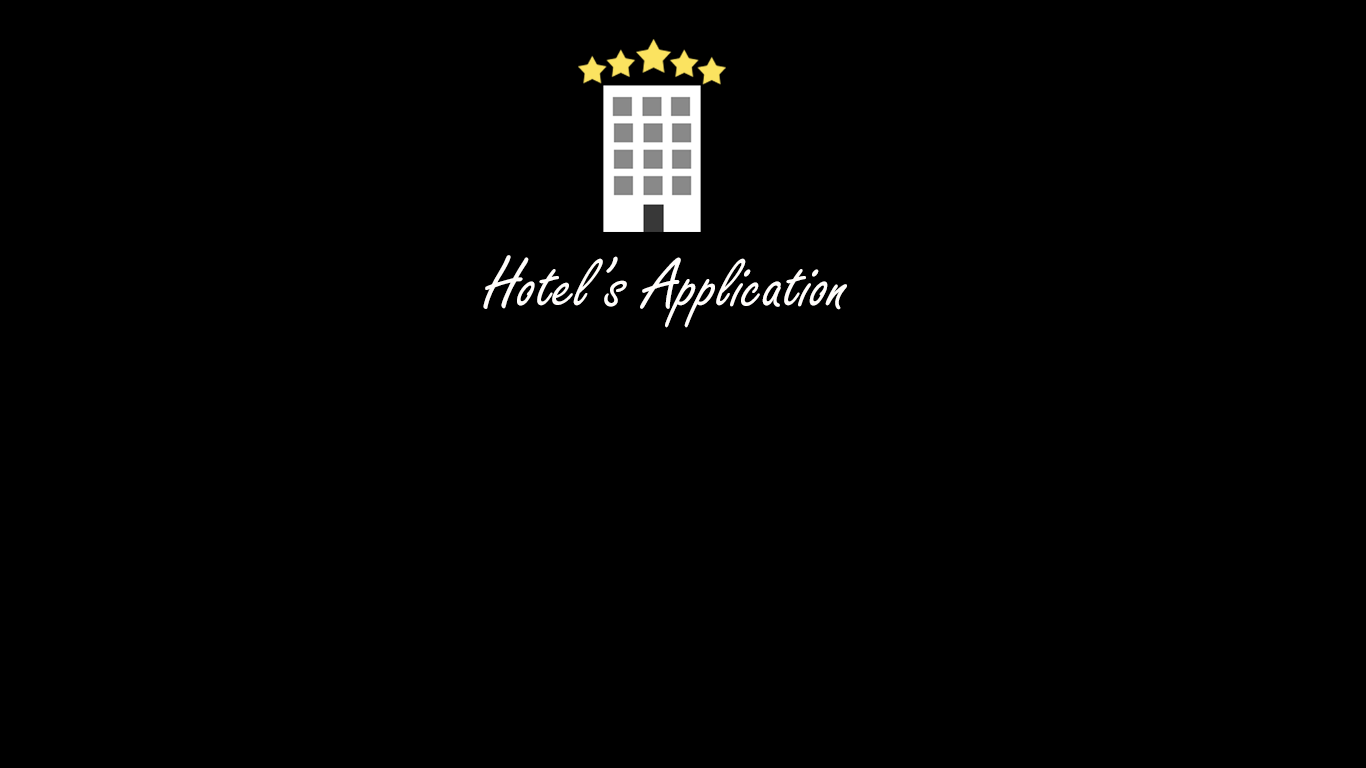
<style>
.page{position:relative;width:1366px;height:768px;background:#000000}
.page>*{position:absolute;margin:0}
.t1{font:75px "FreestyleScript-Regular";color:#fffdfb}
</style>
<div class="page">
<p class="t1" style="left:483px;top:255px;width:364px;height:73px">Hotel’s Application</p>
</div>
